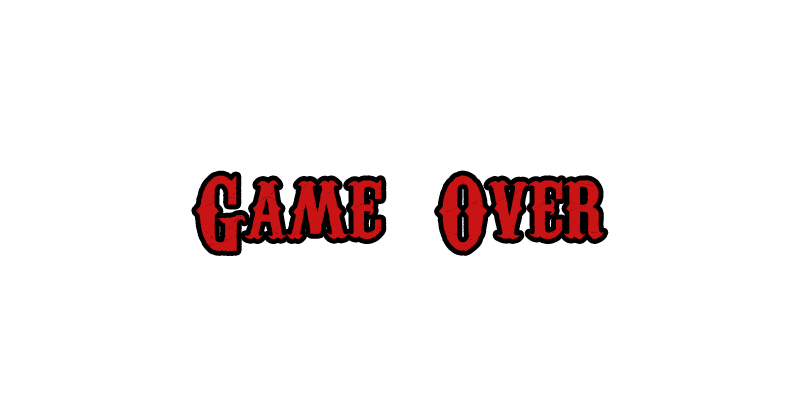
<style>
.page{position:relative;width:800px;height:400px;background:#ffffff}
.page>*{position:absolute;margin:0}
.t1{font:100px "CarnivaleeFreakshow";letter-spacing:0.005em;color:#c81414}
</style>
<div class="page">
<p class="t1" style="left:196px;top:175px;width:408px;height:76px">Game  Over</p>
</div>
